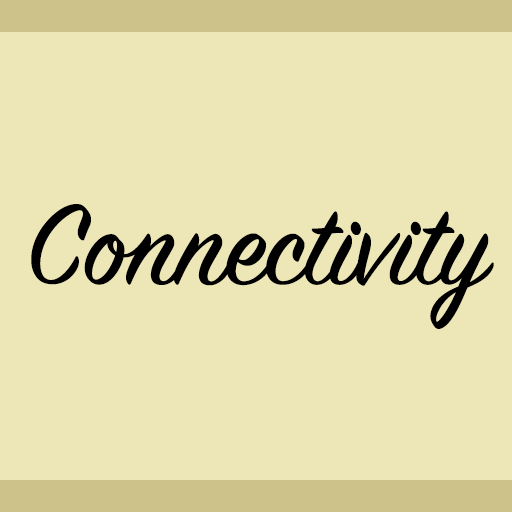
<style>
.page{position:relative;width:512px;height:512px;background:#ede7b8}
.page>*{position:absolute;margin:0}
.t1{font:125px "SignPainter-HouseScript";color:#000000}
</style>
<div class="page">
<p class="t1" style="left:31px;top:204px;width:463px;height:125px">Connectivity</p>
</div>
